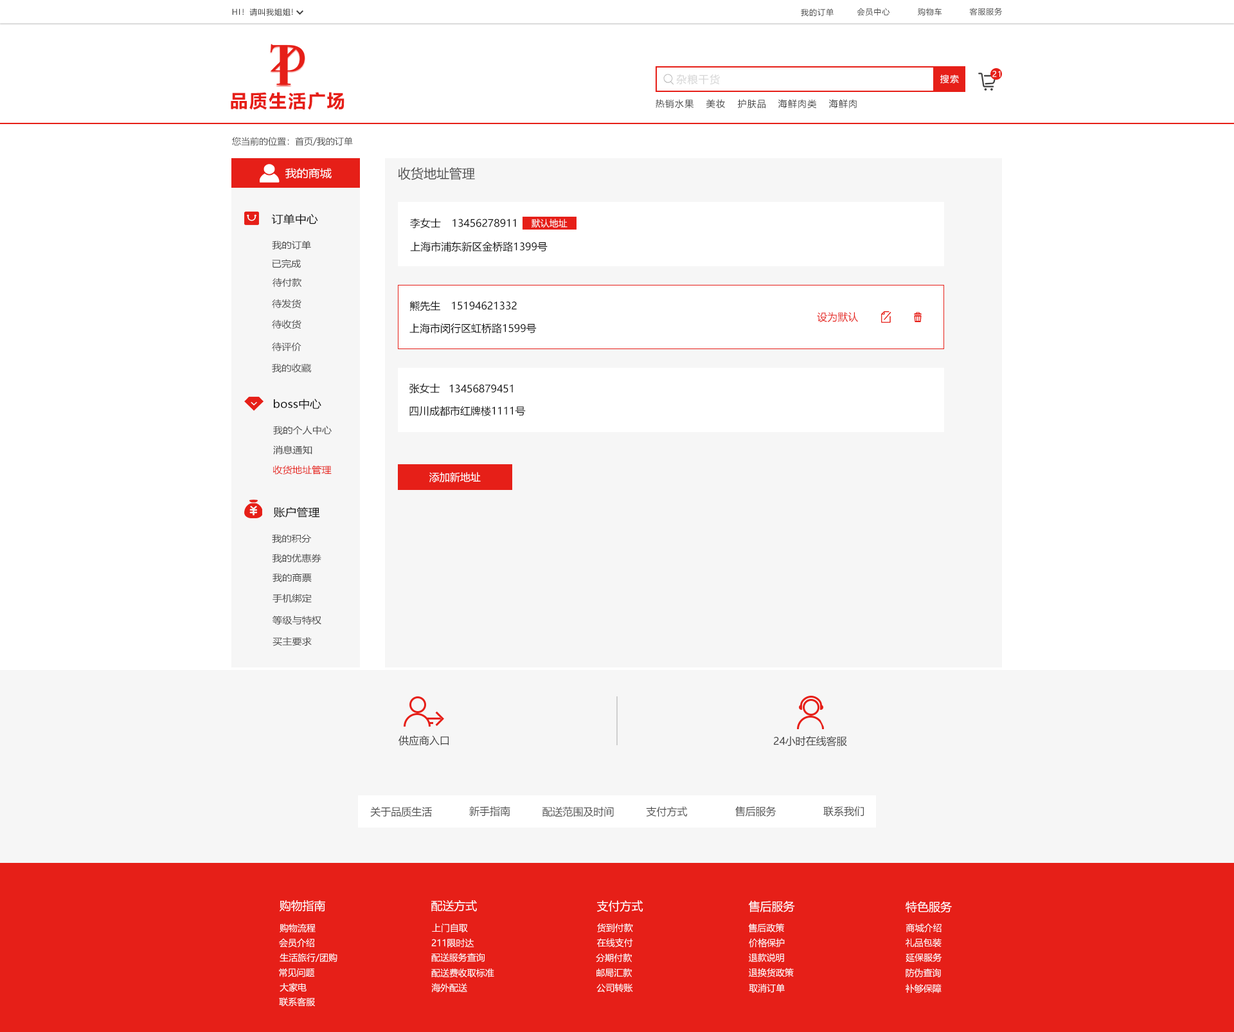
<style>
.page{position:relative;width:1234px;height:1032px;background:#ffffff}
.page>*{position:absolute;margin:0}
.t1{font:7.7px "MicrosoftYaHei";letter-spacing:0.08em;color:#404040}
.t2{font:10.3px "MicrosoftYaHei";letter-spacing:0.08em;color:#d6d6d6}
.t3{font:9px "MicrosoftYaHei";letter-spacing:0.08em;color:#ffffff}
.t4{font:7.7px "MicrosoftYaHei";letter-spacing:0.08em;color:#ffffff}
.t5{font:18px "MicrosoftYaHei-Bold";letter-spacing:0.08em;color:#e61f18}
.t6{font:9px "MicrosoftYaHei";letter-spacing:0.08em;color:#404040}
.t7{font:9px "MicrosoftYaHei";color:#505050}
.t8{font:10.6px "MicrosoftYaHei";color:#ffffff;scale:1.09 1}
.t9{font:12.9px "MicrosoftYaHei";color:#505050}
.t10{font:10.6px "MicrosoftYaHei";color:#101010;scale:1.09 1}
.t11{font:10.3px "MicrosoftYaHei";color:#101010}
.t12{font:9px "MicrosoftYaHei";color:#fefefe}
.t13{font:9px "MicrosoftYaHei";color:#484848;scale:1.09 1}
.t14{font:10.3px "MicrosoftYaHei";color:#e61f18}
.t15{font:9px "MicrosoftYaHei";color:#e61f18;scale:1.09 1}
.t16{font:10.3px "MicrosoftYaHei";color:#ffffff}
.t17{font:10.3px "MicrosoftYaHei";color:#404040}
.t18{font:10.3px "MicrosoftYaHei";color:#505050}
.t19{font:11.6px "MicrosoftYaHei";color:#ffffff}
.t20{font:9px "MicrosoftYaHei";color:#ffffff}
</style>
<div class="page">
<p class="t1" style="left:232px;top:8px;width:61px;height:8px">HI！请叫我姐姐!</p>
<p class="t1" style="left:801px;top:8px;width:33px;height:8px">我的订单</p>
<p class="t1" style="left:857px;top:8px;width:33px;height:8px">会员中心</p>
<p class="t1" style="left:918px;top:8px;width:24px;height:8px">购物车</p>
<p class="t1" style="left:969px;top:8px;width:34px;height:7px">客服服务</p>
<p class="t2" style="left:676px;top:74px;width:44px;height:11px">杂粮干货</p>
<p class="t3" style="left:941px;top:75px;width:18px;height:9px">搜索</p>
<p class="t4" style="left:993px;top:71px;width:8px;height:6px">21</p>
<p class="t5" style="left:231px;top:92px;width:114px;height:18px">品质生活广场</p>
<p class="t6" style="left:656px;top:99px;width:38px;height:10px">热销水果</p>
<p class="t6" style="left:706px;top:99px;width:19px;height:9px">美妆</p>
<p class="t6" style="left:738px;top:99px;width:28px;height:10px">护肤品</p>
<p class="t6" style="left:778px;top:99px;width:39px;height:10px">海鲜肉类</p>
<p class="t6" style="left:829px;top:99px;width:28px;height:10px">海鲜肉</p>
<p class="t7" style="left:232px;top:137px;width:121px;height:9px">您当前的位置：首页/我的订单</p>
<p class="t8" style="left:285px;top:168px;width:47px;height:11px">我的商城</p>
<p class="t9" style="left:398px;top:167px;width:77px;height:13px">收货地址管理</p>
<p class="t10" style="left:271px;top:213px;width:47px;height:11px">订单中心</p>
<p class="t11" style="left:410px;top:218px;width:31px;height:10px">李女士</p>
<p class="t11" style="left:453px;top:219px;width:63px;height:8px">13456278911</p>
<p class="t12" style="left:532px;top:219px;width:36px;height:9px">默认地址</p>
<p class="t13" style="left:272px;top:240px;width:39px;height:9px">我的订单</p>
<p class="t11" style="left:410px;top:241px;width:138px;height:11px">上海市浦东新区金桥路1399号</p>
<p class="t13" style="left:272px;top:259px;width:29px;height:9px">已完成</p>
<p class="t13" style="left:273px;top:278px;width:29px;height:9px">待付款</p>
<p class="t13" style="left:272px;top:299px;width:30px;height:10px">待发货</p>
<p class="t11" style="left:410px;top:300px;width:30px;height:11px">熊先生</p>
<p class="t11" style="left:452px;top:302px;width:65px;height:8px">15194621332</p>
<p class="t14" style="left:817px;top:312px;width:41px;height:10px">设为默认</p>
<p class="t13" style="left:272px;top:320px;width:30px;height:9px">待收货</p>
<p class="t11" style="left:410px;top:323px;width:127px;height:11px">上海市闵行区虹桥路1599号</p>
<p class="t13" style="left:272px;top:342px;width:30px;height:10px">待评价</p>
<p class="t13" style="left:272px;top:363px;width:39px;height:10px">我的收藏</p>
<p class="t11" style="left:410px;top:383px;width:30px;height:10px">张女士</p>
<p class="t11" style="left:449px;top:384px;width:64px;height:9px">13456879451</p>
<p class="t10" style="left:274px;top:399px;width:47px;height:11px">boss中心</p>
<p class="t11" style="left:410px;top:406px;width:116px;height:10px">四川成都市红牌楼1111号</p>
<p class="t13" style="left:273px;top:426px;width:59px;height:9px">我的个人中心</p>
<p class="t13" style="left:273px;top:446px;width:39px;height:9px">消息通知</p>
<p class="t15" style="left:273px;top:465px;width:59px;height:9px">收货地址管理</p>
<p class="t16" style="left:429px;top:472px;width:52px;height:10px">添加新地址</p>
<p class="t10" style="left:273px;top:507px;width:47px;height:11px">账户管理</p>
<p class="t13" style="left:272px;top:534px;width:40px;height:9px">我的积分</p>
<p class="t13" style="left:272px;top:554px;width:49px;height:8px">我的优惠券</p>
<p class="t13" style="left:273px;top:573px;width:39px;height:9px">我的商票</p>
<p class="t13" style="left:273px;top:593px;width:39px;height:10px">手机绑定</p>
<p class="t13" style="left:273px;top:615px;width:48px;height:10px">等级与特权</p>
<p class="t13" style="left:273px;top:636px;width:39px;height:10px">买主要求</p>
<p class="t17" style="left:399px;top:735px;width:50px;height:11px">供应商入口</p>
<p class="t17" style="left:774px;top:735px;width:73px;height:11px">24小时在线客服</p>
<p class="t18" style="left:370px;top:806px;width:62px;height:11px">关于品质生活</p>
<p class="t18" style="left:469px;top:806px;width:41px;height:10px">新手指南</p>
<p class="t18" style="left:543px;top:806px;width:71px;height:11px">配送范围及时间</p>
<p class="t18" style="left:646px;top:806px;width:42px;height:10px">支付方式</p>
<p class="t18" style="left:735px;top:806px;width:42px;height:10px">售后服务</p>
<p class="t18" style="left:824px;top:806px;width:40px;height:10px">联系我们</p>
<p class="t19" style="left:280px;top:900px;width:45px;height:12px">购物指南</p>
<p class="t19" style="left:431px;top:900px;width:46px;height:12px">配送方式</p>
<p class="t19" style="left:597px;top:900px;width:47px;height:12px">支付方式</p>
<p class="t19" style="left:748px;top:900px;width:47px;height:12px">售后服务</p>
<p class="t19" style="left:906px;top:901px;width:46px;height:12px">特色服务</p>
<p class="t20" style="left:280px;top:923px;width:36px;height:9px">购物流程</p>
<p class="t20" style="left:432px;top:923px;width:36px;height:9px">上门自取</p>
<p class="t20" style="left:597px;top:923px;width:36px;height:9px">货到付款</p>
<p class="t20" style="left:748px;top:923px;width:36px;height:9px">售后政策</p>
<p class="t20" style="left:906px;top:923px;width:36px;height:9px">商城介绍</p>
<p class="t20" style="left:279px;top:938px;width:35px;height:10px">会员介绍</p>
<p class="t20" style="left:431px;top:938px;width:43px;height:10px">211限时达</p>
<p class="t20" style="left:597px;top:938px;width:36px;height:9px">在线支付</p>
<p class="t20" style="left:749px;top:938px;width:36px;height:10px">价格保护</p>
<p class="t20" style="left:906px;top:938px;width:36px;height:9px">礼品包装</p>
<p class="t20" style="left:280px;top:953px;width:58px;height:9px">生活旅行/团购</p>
<p class="t20" style="left:431px;top:953px;width:54px;height:9px">配送服务查询</p>
<p class="t20" style="left:596px;top:953px;width:36px;height:9px">分期付款</p>
<p class="t20" style="left:749px;top:953px;width:35px;height:9px">退款说明</p>
<p class="t20" style="left:906px;top:953px;width:36px;height:9px">延保服务</p>
<p class="t20" style="left:279px;top:968px;width:36px;height:9px">常见问题</p>
<p class="t20" style="left:431px;top:968px;width:63px;height:9px">配送费收取标准</p>
<p class="t20" style="left:597px;top:968px;width:35px;height:9px">邮局汇款</p>
<p class="t20" style="left:749px;top:968px;width:45px;height:9px">退换货政策</p>
<p class="t20" style="left:906px;top:968px;width:35px;height:9px">防伪查询</p>
<p class="t20" style="left:280px;top:982px;width:27px;height:10px">大家电</p>
<p class="t20" style="left:431px;top:983px;width:36px;height:9px">海外配送</p>
<p class="t20" style="left:597px;top:983px;width:36px;height:10px">公司转账</p>
<p class="t20" style="left:749px;top:984px;width:36px;height:9px">取消订单</p>
<p class="t20" style="left:906px;top:984px;width:36px;height:9px">补够保障</p>
<p class="t20" style="left:279px;top:997px;width:36px;height:9px">联系客服</p>
</div>
